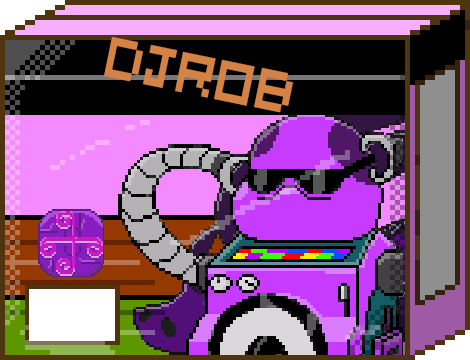
<style>
.page{position:relative;width:470px;height:360px;background:#000000}
.page>*{position:absolute;margin:0}
.t1{font:64px "5x5-Pixel";color:#d58245;scale:0.83 1}
</style>
<div class="page">
<p class="t1" style="left:104px;top:36px;width:189px;height:77px;rotate:12deg">DJROB</p>
</div>
